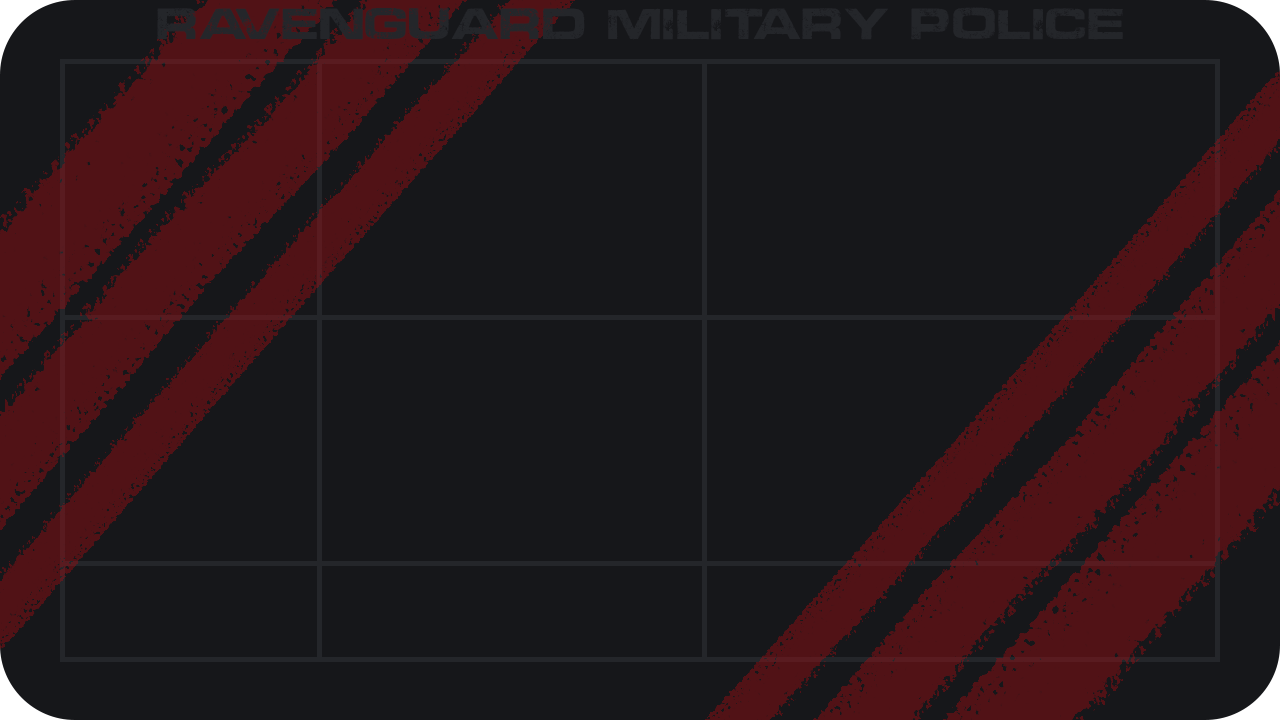
<style>
.page{position:relative;width:1280px;height:720px;background:#16171a}
.page>*{position:absolute;margin:0}
.t1{font:58.3px "PROGRESSPERSONALUSE";color:#24262a}
</style>
<div class="page">
<p class="t1" style="left:157px;top:7px;width:966px;height:33px">RAVENGUARD military police</p>
</div>
